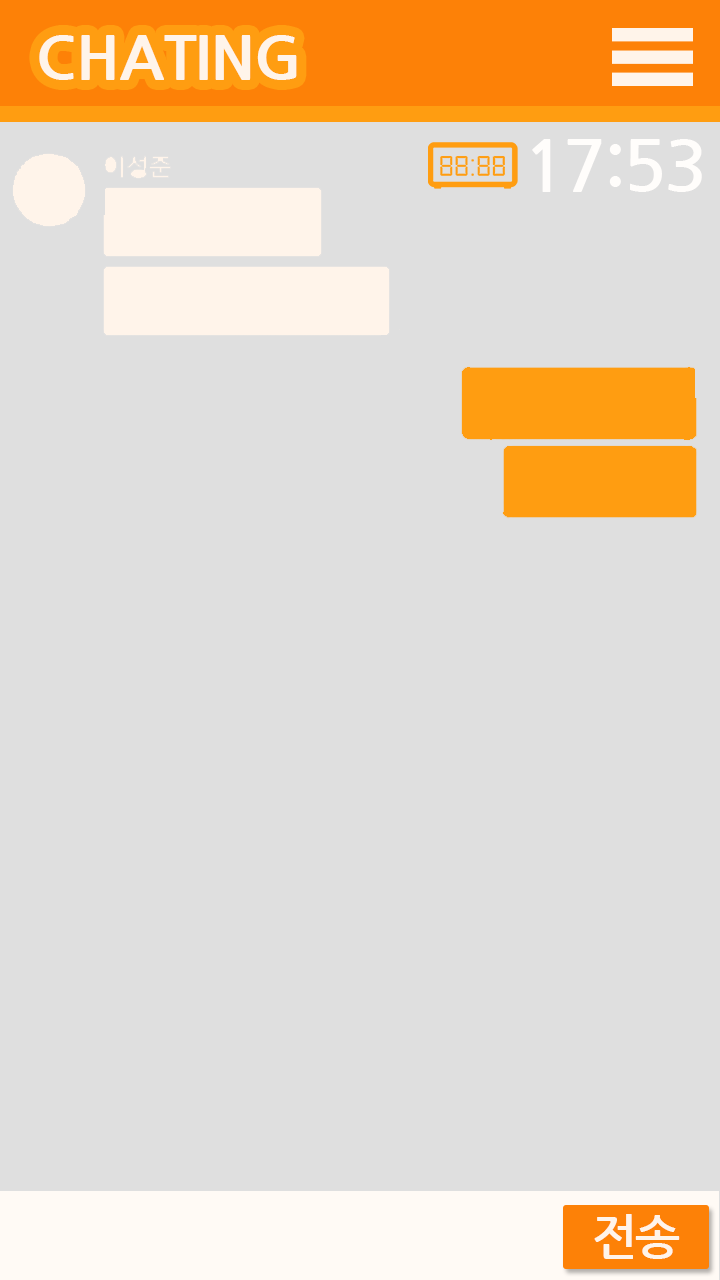
<style>
.page{position:relative;width:720px;height:1280px;background:#dfdfdf}
.page>*{position:absolute;margin:0}
.t1{font:60px "NanumGothicExtraBold";color:#fff4ea}
.t2{font:72px "NanumGothicBold";letter-spacing:-0.04em;color:#fffdfb}
.t3{font:48px "NanumGothicBold";letter-spacing:-0.04em;color:#fff4ea}
</style>
<div class="page">
<p class="t1" style="left:39px;top:35px;width:258px;height:45px">CHATING</p>
<p class="t2" style="left:532px;top:139px;width:170px;height:53px">17:53</p>
<p class="t3" style="left:594px;top:1214px;width:86px;height:45px">전송</p>
</div>
